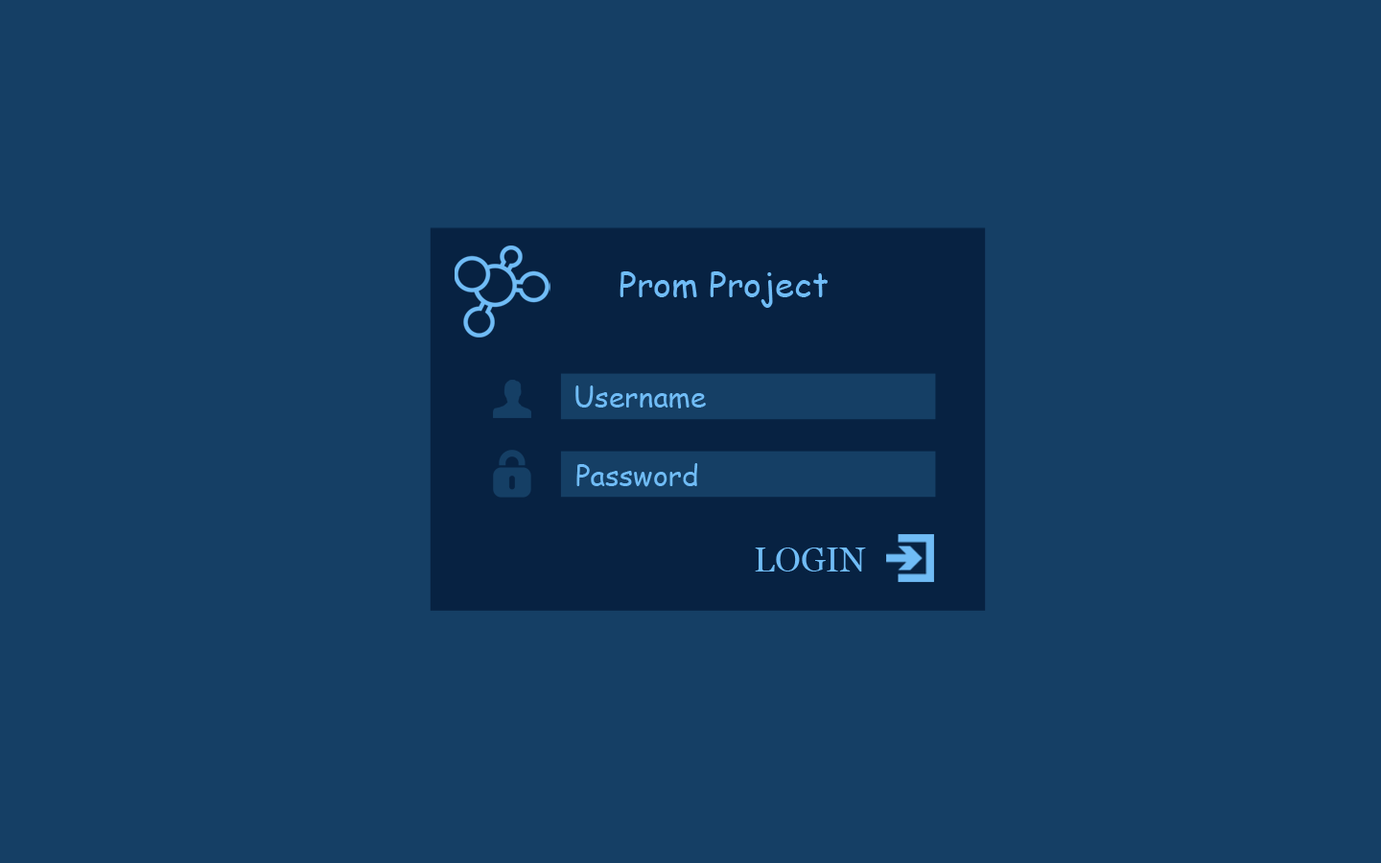
<style>
.page{position:relative;width:1381px;height:863px;background:#153f65}
.page>*{position:absolute;margin:0}
.t1{font:34.5px "ComicSansMS";color:#70bcf6}
.t2{font:28.8px "ComicSansMS";color:#70bcf6}
.t3{font:34.5px "Georgia";color:#70bcf6}
</style>
<div class="page">
<p class="t1" style="left:620px;top:271px;width:208px;height:37px">Prom Project</p>
<p class="t2" style="left:576px;top:386px;width:130px;height:23px">Username</p>
<p class="t2" style="left:576px;top:463px;width:122px;height:24px">Password</p>
<p class="t3" style="left:755px;top:548px;width:111px;height:24px">LOGIN</p>
</div>
